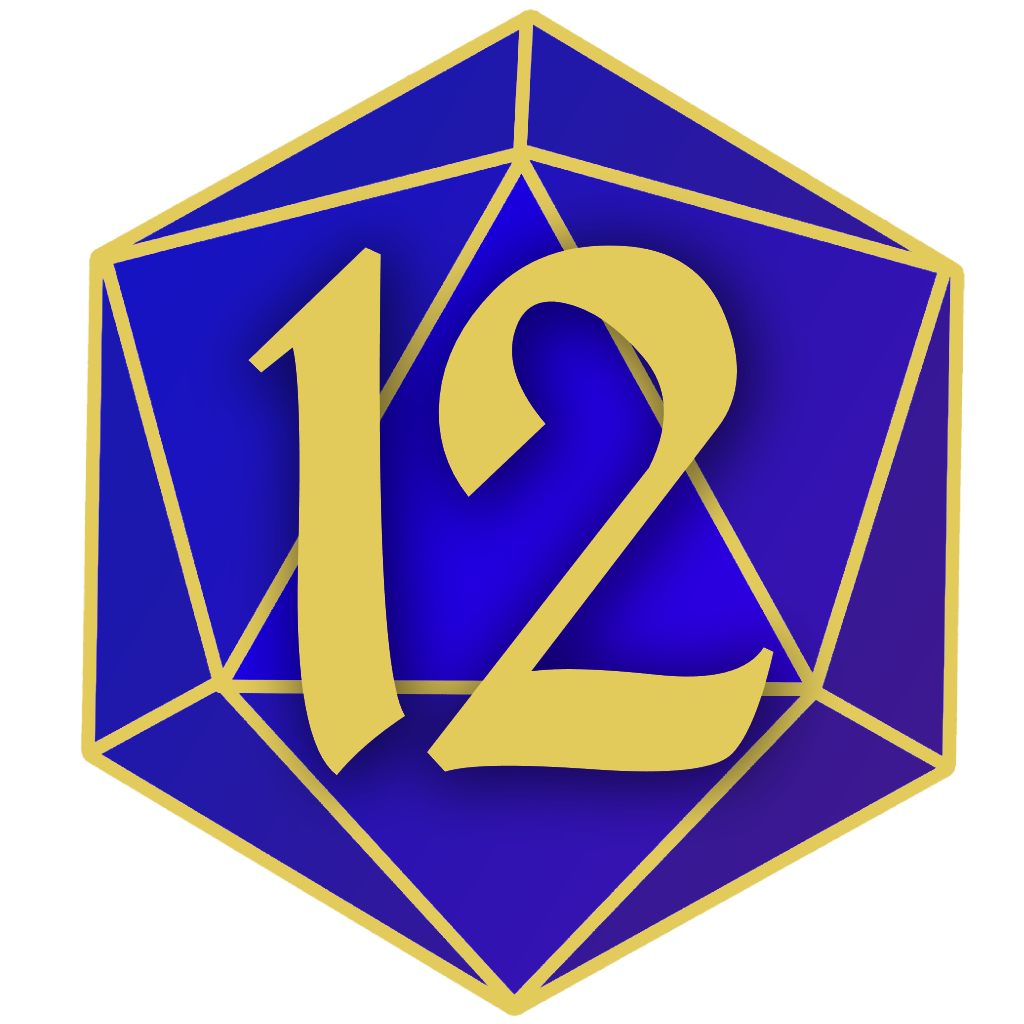
<style>
.page{position:relative;width:1024px;height:1024px;background:#ffffff}
.page>*{position:absolute;margin:0}
.t1{font:806px "KingthingsPetrock";color:#e2ca5b}
</style>
<div class="page">
<p class="t1" style="left:248px;top:242px;width:526px;height:536px">12</p>
</div>
